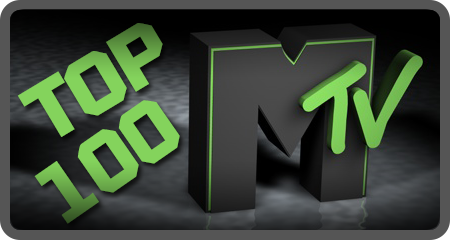
<style>
.page{position:relative;width:450px;height:240px}
.page>*{position:absolute;margin:0}
.t1{font:100px "MTV2C";color:#84d35c}
</style>
<div class="page">
<p class="t1" style="left:17px;top:23px;width:146px;height:114px;rotate:-31deg">TOP</p>
<p class="t1" style="left:34px;top:100px;width:146px;height:124px;rotate:-35deg">100</p>
</div>
